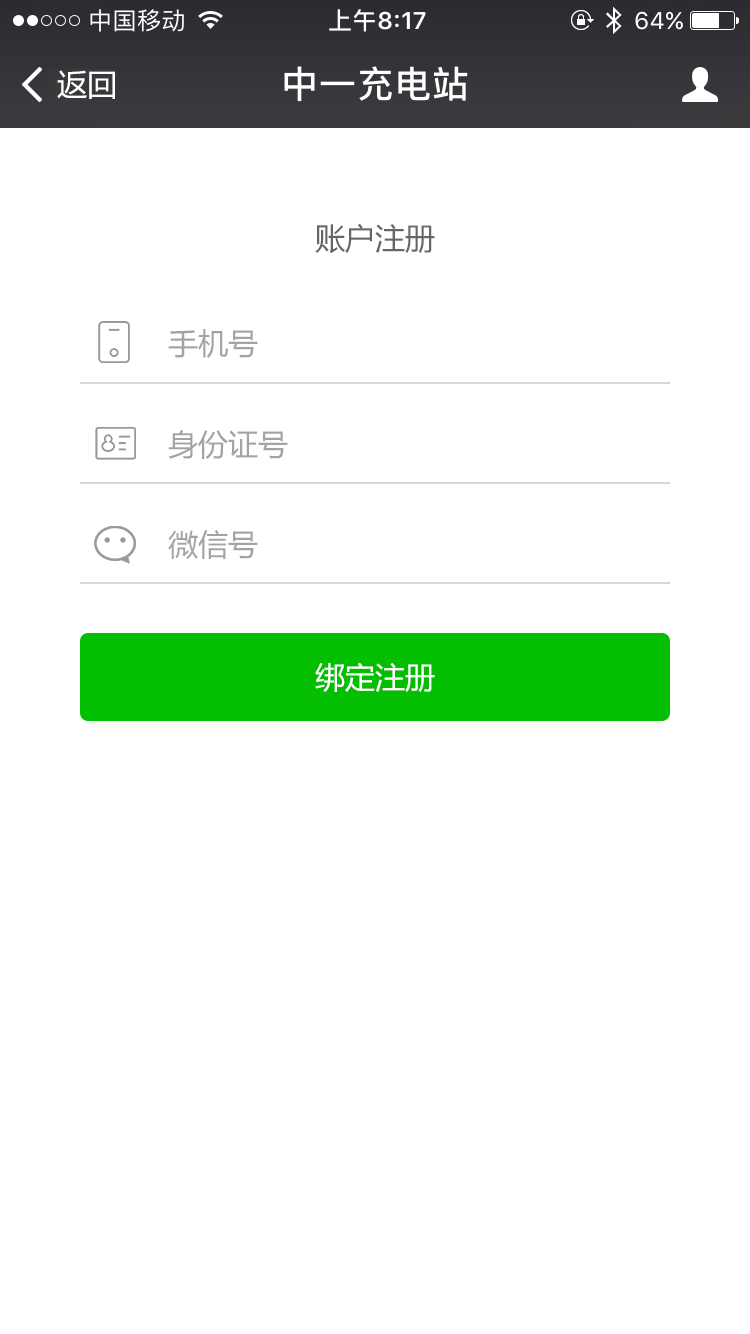
<style>
.page{position:relative;width:750px;height:1334px;background:#ffffff}
.page>*{position:absolute;margin:0}
.t1{font:30px "MicrosoftYaHei";color:#ffffff}
.t2{font:30px "MicrosoftYaHei";color:#666666}
.t3{font:30px "MicrosoftYaHei";color:#a3a3a3}
</style>
<div class="page">
<p class="t1" style="left:57px;top:70px;width:58px;height:29px">返回</p>
<p class="t2" style="left:315px;top:223px;width:120px;height:31px">账户注册</p>
<p class="t3" style="left:168px;top:329px;width:90px;height:29px">手机号</p>
<p class="t3" style="left:168px;top:430px;width:120px;height:29px">身份证号</p>
<p class="t3" style="left:168px;top:530px;width:90px;height:30px">微信号</p>
<p class="t1" style="left:315px;top:662px;width:120px;height:30px">绑定注册</p>
</div>
